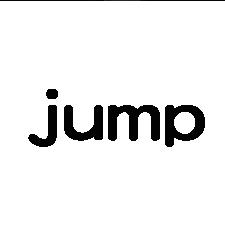
<style>
.page{position:relative;width:225px;height:225px;background:#ffffff}
.page>*{position:absolute;margin:0}
.t1{font:65px "DFYuan-W8-WINP-BF";color:#030303;font-weight:bold;scale:1.03 1}
</style>
<div class="page">
<p class="t1" style="left:28px;top:88px;width:177px;height:58px">jump</p>
</div>
